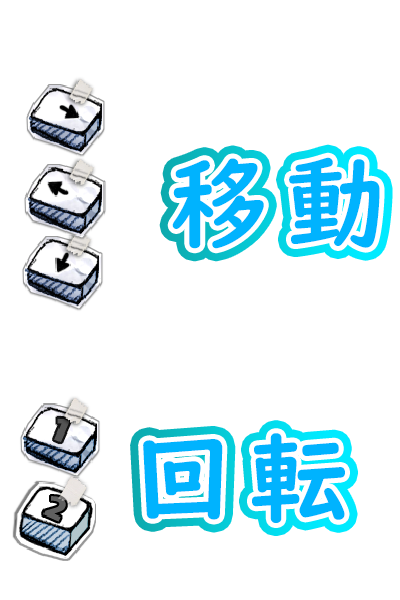
<style>
.page{position:relative;width:400px;height:600px;background:#ffffff}
.page>*{position:absolute;margin:0}
.t1{font:100px "UDDigiKyokashoN-B";letter-spacing:0.16em;color:#00b3fe}
</style>
<div class="page">
<p class="t1" style="left:172px;top:157px;width:208px;height:92px">移動</p>
<p class="t1" style="left:143px;top:433px;width:202px;height:90px">回転</p>
</div>
